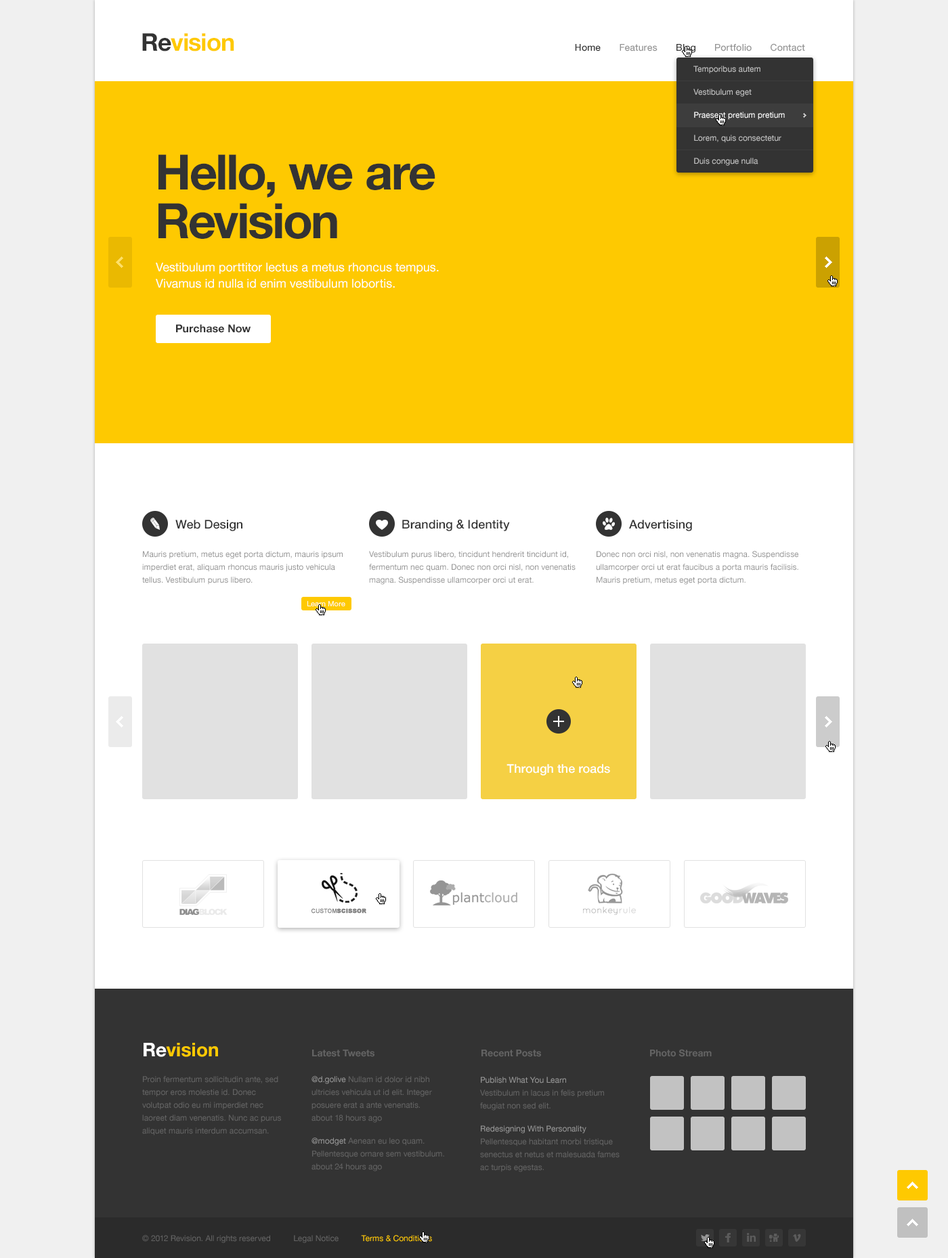
<style>
.page{position:relative;width:948px;height:1258px;background:#ffffff}
.page>*{position:absolute;margin:0}
.t1{font:24.4px "HelveticaNeue-Bold";letter-spacing:-0.025em;color:#fec901}
.t2{font:24.4px "HelveticaNeue-Bold";letter-spacing:-0.025em;color:#333333}
.t3{font:9.5px "HelveticaNeue-Medium";color:#959595}
.t4{font:9.5px "HelveticaNeue-Medium";color:#333333}
.t5{font:8.1px/9.5px "HelveticaNeue";color:#c2c2c2}
.t6{font:8.1px/9.5px "HelveticaNeue";color:#ffffff}
.t7{font:48.7px/48.7px "HelveticaNeue-Bold";letter-spacing:-0.025em;color:#333333}
.t8{font:12.2px/16.2px "HelveticaNeue";color:#ffffff}
.t9{font:10.8px "HelveticaNeue-Bold";color:#333333}
.t10{font:12.2px "HelveticaNeue-Medium";color:#333333}
.t11{font:8.1px/12.9px "HelveticaNeue";color:#959595}
.t12{font:7.4px "HelveticaNeue";color:#ffffff}
.t13{font:12.2px "HelveticaNeue-Medium";color:#ffffff}
.t14{font:19px "HelveticaNeue-Bold";color:#fec901}
.t15{font:19px "HelveticaNeue-Bold";color:#ffffff}
.t16{font:9.5px "HelveticaNeue-Bold";color:#636363}
.t17{font:8.1px/12.9px "HelveticaNeue";color:#636363}
.t18{font:8.1px "HelveticaNeue";color:#636363}
.t19{font:8.1px "HelveticaNeue";color:#fec901}
</style>
<div class="page">
<p class="t1" style="left:142px;top:33px;width:92px;height:18px"><span class="t2">Re</span>vision</p>
<p class="t3" style="left:575px;top:43px;width:230px;height:10px"><span class="t4">Home       </span>Features       <span class="t4">Blog       </span>Portfolio       Contact</p>
<p class="t5" style="left:693px;top:66px;width:92px;height:100px">Temporibus autem<br>Vestibulum eget<br><span class="t6">Praesent pretium pretium<br></span>Lorem, quis consectetur <br>Duis congue nulla</p>
<p class="t7" style="left:158px;top:154px;width:277px;height:85px">Hello, we are Revision</p>
<p class="t8" style="left:156px;top:263px;width:283px;height:25px">Vestibulum porttitor lectus a metus rhoncus tempus. Vivamus id nulla id enim vestibulum lobortis.</p>
<p class="t9" style="left:176px;top:324px;width:75px;height:9px">Purchase Now</p>
<p class="t10" style="left:175px;top:520px;width:67px;height:11px">Web Design</p>
<p class="t10" style="left:402px;top:519px;width:108px;height:12px">Branding &amp; Identity</p>
<p class="t10" style="left:629px;top:520px;width:63px;height:11px">Advertising</p>
<p class="t11" style="left:142px;top:551px;width:201px;height:34px">Mauris pretium, metus eget porta dictum, mauris ipsum imperdiet erat, aliquam rhoncus mauris justo vehicula tellus. Vestibulum purus libero.</p>
<p class="t11" style="left:369px;top:551px;width:206px;height:34px">Vestibulum purus libero, tincidunt hendrerit tincidunt id, fermentum nec quam. Donec non orci nisl, non venenatis magna. Suspendisse ullamcorper orci ut erat.</p>
<p class="t11" style="left:596px;top:551px;width:202px;height:34px">Donec non orci nisl, non venenatis magna. Suspendisse ullamcorper orci ut erat faucibus a porta mauris facilisis. Mauris pretium, metus eget porta dictum.</p>
<p class="t12" style="left:307px;top:601px;width:38px;height:5px">Learn More</p>
<p class="t13" style="left:506px;top:764px;width:104px;height:12px">Through the roads</p>
<p class="t14" style="left:143px;top:1043px;width:75px;height:14px"><span class="t15">Re</span>vision</p>
<p class="t16" style="left:312px;top:1050px;width:62px;height:7px">Latest Tweets</p>
<p class="t16" style="left:481px;top:1050px;width:60px;height:7px">Recent Posts</p>
<p class="t16" style="left:650px;top:1049px;width:61px;height:8px">Photo Stream</p>
<p class="t17" style="left:142px;top:1076px;width:139px;height:60px">Proin fermentum sollicitudin ante, sed tempor eros molestie id. Donec volutpat odio eu mi imperdiet nec laoreet diam venenatis. Nunc ac purus aliquet mauris interdum accumsan.</p>
<p class="t17" style="left:311px;top:1076px;width:133px;height:96px"><span class="t11">@d.golive </span>Nullam id dolor id nibh ultricies vehicula ut id elit. Integer posuere erat a ante venenatis.<br>about 18 hours ago<br><span class="t11">@modget </span>Aenean eu leo quam. Pellentesque ornare sem vestibulum.<br>about 24 hours ago</p>
<p class="t17" style="left:480px;top:1077px;width:139px;height:95px"><span class="t11">Publish What You Learn<br></span>Vestibulum in lacus in felis pretium feugiat non sed elit.<br><span class="t11">Redesigning With Personality<br></span>Pellentesque habitant morbi tristique senectus et netus et malesuada fames ac turpis egestas.</p>
<p class="t18" style="left:142px;top:1235px;width:290px;height:8px">© 2012 Revision. All rights reserved          Legal Notice          <span class="t19">Terms &amp; Conditions</span></p>
</div>
